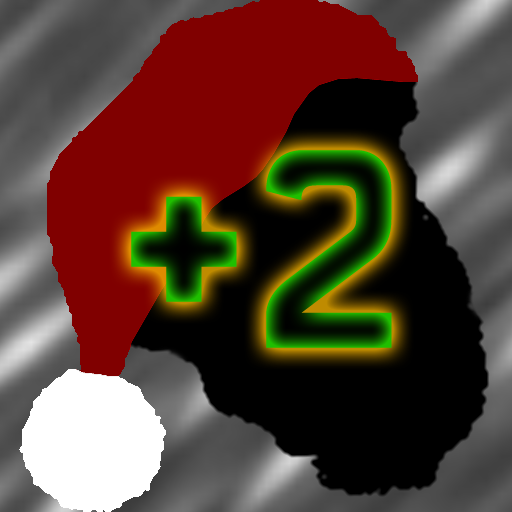
<style>
.page{position:relative;width:512px;height:512px}
.page>*{position:absolute;margin:0}
.t1{font:250px "Mandatory"}
</style>
<div class="page">
<p class="t1" style="left:131px;top:150px;width:261px;height:198px">+2</p>
</div>
